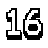
<style>
.page{position:relative;width:48px;height:48px;background:#ffffff}
.page>*{position:absolute;margin:0}
.t1{font:36px "KarmaFuture-Regular";color:#010101}
</style>
<div class="page">
<p class="t1" style="left:6px;top:8px;width:37px;height:32px">16</p>
</div>
